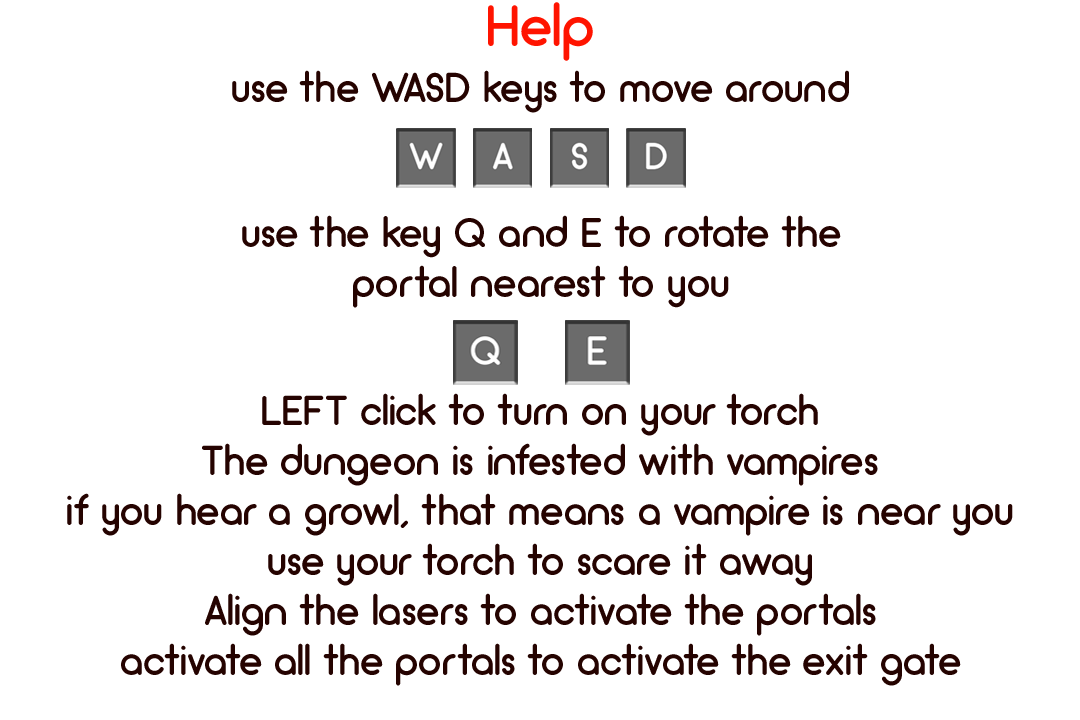
<style>
.page{position:relative;width:1080px;height:720px;background:#ffffff}
.page>*{position:absolute;margin:0}
.t1{font:58.3px "Arciform";color:#ff1400}
.t2{font:41.7px "Arciform";color:#250300}
.t3{font:41.6px "Arciform";color:#250300}
</style>
<div class="page">
<p class="t1" style="left:488px;top:2px;width:105px;height:59px">Help</p>
<p class="t2" style="left:232px;top:70px;width:617px;height:43px">use the WASD keys to move around</p>
<p class="t3" style="left:242px;top:215px;width:599px;height:93px;text-align:center">use the key Q and E to rotate the<br>portal nearest to you</p>
<p class="t2" style="left:67px;top:393px;width:946px;height:293px;text-align:center">LEFT click to turn on your torch<br>The dungeon is infested with vampires<br>if you hear a growl, that means a vampire is near you<br>use your torch to scare it away<br>Align the lasers to activate the portals<br>activate all the portals to activate the exit gate</p>
</div>
